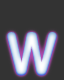
<style>
.page{position:relative;width:64px;height:80px;background:#333333}
.page>*{position:absolute;margin:0}
.t1{font:60px "AGBuchRoundedCondensedBQ-BoldOutline";scale:0.96 1}
</style>
<div class="page">
<p class="t1" style="left:7px;top:32px;width:50px;height:44px">W</p>
</div>
